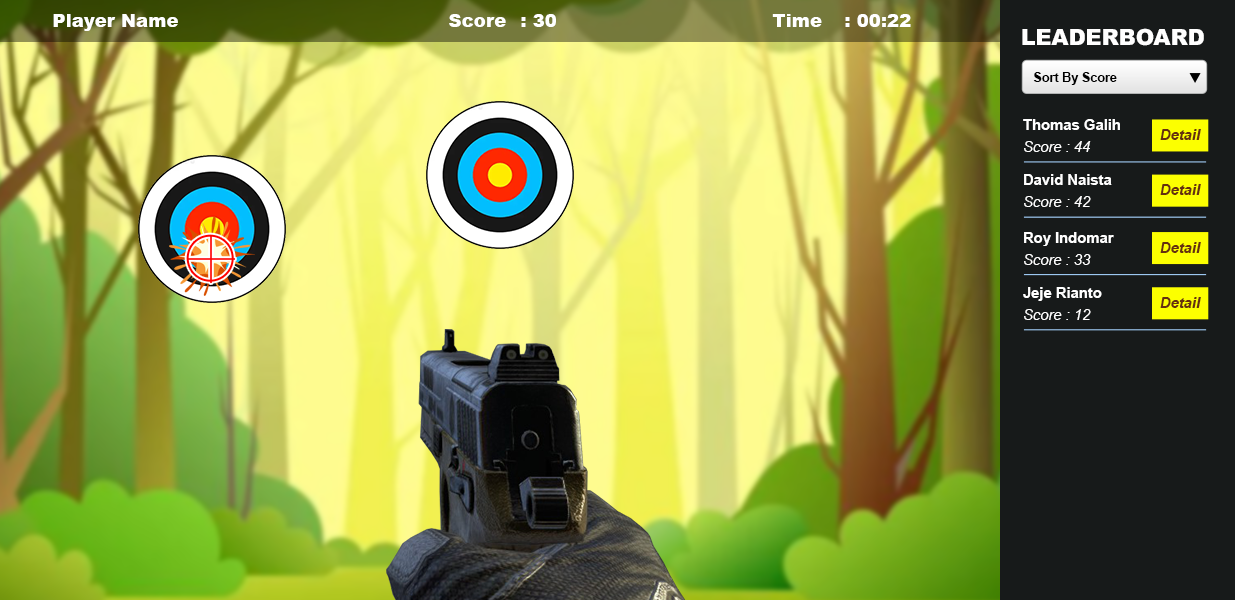
<style>
.page{position:relative;width:1235px;height:600px}
.page>*{position:absolute;margin:0}
.t1{font:18.2px "Arial-Black";color:#ffffff}
.t2{font:22.3px "Arial-Black";letter-spacing:-0.01em;color:#ffffff;text-transform:uppercase}
.t3{font:12.9px "Arial-BoldMT";letter-spacing:-0.01em;color:#000000}
.t4{font:15.1px "Arial-BoldMT";letter-spacing:-0.01em;color:#ffffff}
.t5{font:15.1px "Arial-BoldItalicMT";letter-spacing:-0.01em;color:#652f10}
.t6{font:15.1px "Arial-ItalicMT";letter-spacing:-0.01em;color:#ffffff}
</style>
<div class="page">
<p class="t1" style="left:53px;top:14px;width:858px;height:17px">Player Name        Score : 30      Time : 00:22</p>
<p class="t2" style="left:1022px;top:28px;width:182px;height:18px">Leaderboard</p>
<p class="t3" style="left:1033px;top:72px;width:84px;height:13px">Sort By Score</p>
<p class="t4" style="left:1023px;top:119px;width:97px;height:11px">Thomas Galih</p>
<p class="t5" style="left:1160px;top:129px;width:41px;height:11px">Detail</p>
<p class="t6" style="left:1024px;top:141px;width:67px;height:11px">Score : 44</p>
<p class="t4" style="left:1024px;top:174px;width:88px;height:11px">David Naista</p>
<p class="t5" style="left:1160px;top:184px;width:41px;height:11px">Detail</p>
<p class="t6" style="left:1024px;top:196px;width:67px;height:11px">Score : 42</p>
<p class="t4" style="left:1024px;top:232px;width:90px;height:14px">Roy Indomar</p>
<p class="t5" style="left:1160px;top:242px;width:41px;height:11px">Detail</p>
<p class="t6" style="left:1024px;top:254px;width:67px;height:11px">Score : 33</p>
<p class="t4" style="left:1023px;top:287px;width:79px;height:14px">Jeje Rianto</p>
<p class="t5" style="left:1160px;top:297px;width:41px;height:11px">Detail</p>
<p class="t6" style="left:1024px;top:309px;width:67px;height:11px">Score : 12</p>
</div>
